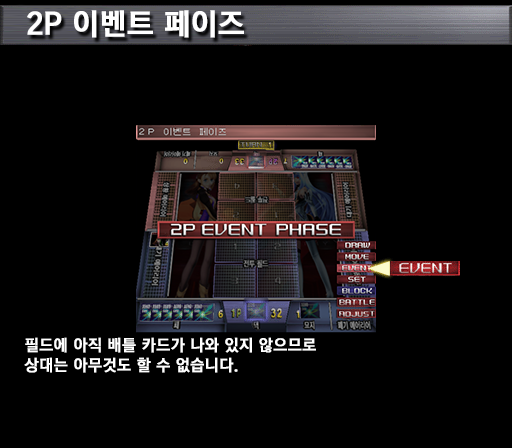
<style>
.page{position:relative;width:512px;height:448px;background:#000000}
.page>*{position:absolute;margin:0}
.t1{font:30px "KoreanGD15-R";color:#ffffff;font-weight:bold}
.t2{font:16px/20px "KoreanGD15-R";color:#ffffff;font-weight:bold}
</style>
<div class="page">
<p class="t1" style="left:27px;top:10px;width:217px;height:28px">2P 이벤트 페이즈</p>
<p class="t2" style="left:24px;top:337px;width:292px;height:36px">필드에 아직 배틀 카드가 나와 있지 않으므로<br>상대는 아무것도 할 수 없습니다.</p>
</div>
